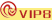
<style>
.page{position:relative;width:52px;height:20px;background:#ffffff}
.page>*{position:absolute;margin:0}
.t1{font:12px "FZCQJW--GB1-0";letter-spacing:0.1em;color:#b72025}
</style>
<div class="page">
<p class="t1" style="left:19px;top:10px;width:32px;height:9px">VIP8</p>
</div>
